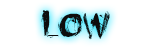
<style>
.page{position:relative;width:150px;height:50px;background:#ffffff}
.page>*{position:absolute;margin:0}
.t1{font:36px "FaceYourFears";color:#0e0e0e}
</style>
<div class="page">
<p class="t1" style="left:41px;top:10px;width:69px;height:30px">Low</p>
</div>
